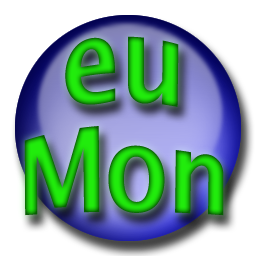
<style>
.page{position:relative;width:256px;height:256px;background:#ffffff}
.page>*{position:absolute;margin:0}
.t1{font:100px/91.7px "LucidaSans-Demi"}
</style>
<div class="page">
<p class="t1" style="left:24px;top:36px;width:200px;height:180px;text-align:center">eu<br>Mon</p>
</div>
